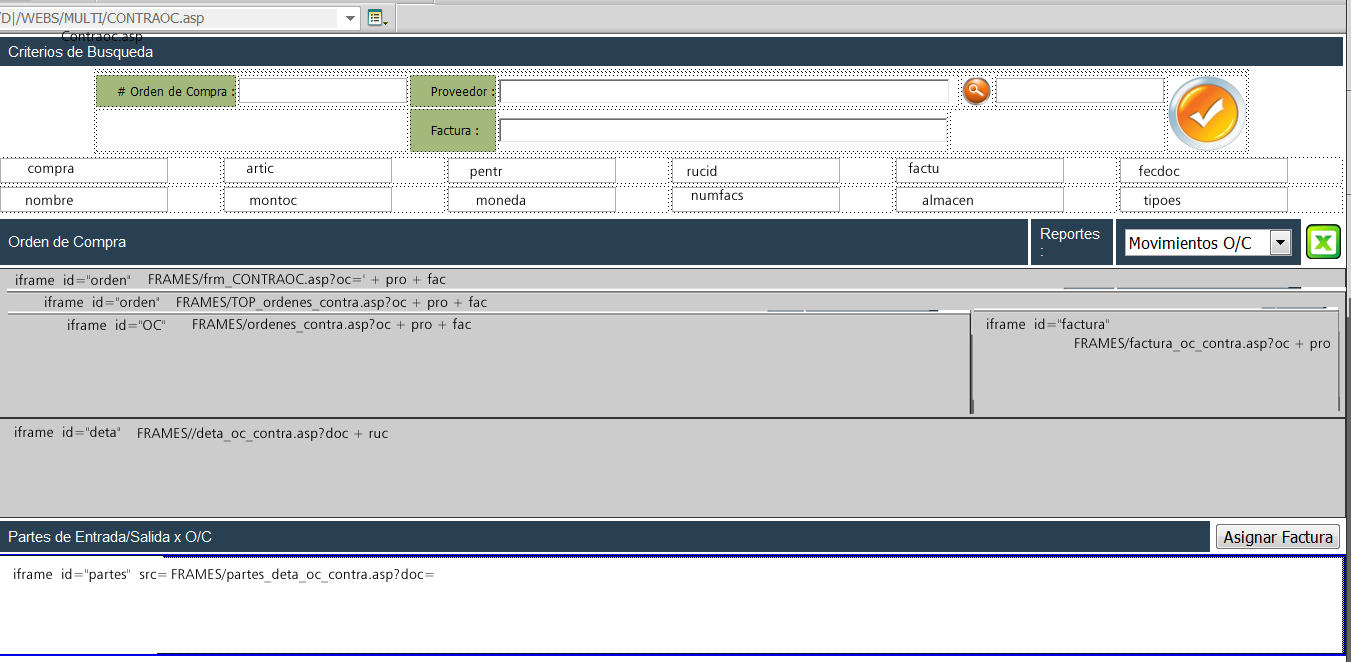
<style>
.page{position:relative;width:1351px;height:662px;background:#ffffff}
.page>*{position:absolute;margin:0}
.t1{font:14px "Humanist777BT-LightB";letter-spacing:0.02em;color:#000000}
</style>
<div class="page">
<p class="t1" style="left:62px;top:31px;width:80px;height:13px">Contraoc.asp</p>
<p class="t1" style="left:28px;top:165px;width:46px;height:11px">compra</p>
<p class="t1" style="left:247px;top:162px;width:27px;height:11px">artic</p>
<p class="t1" style="left:470px;top:167px;width:33px;height:12px">pentr</p>
<p class="t1" style="left:687px;top:165px;width:30px;height:11px">rucid</p>
<p class="t1" style="left:908px;top:162px;width:31px;height:11px">factu</p>
<p class="t1" style="left:1138px;top:165px;width:42px;height:11px">fecdoc</p>
<p class="t1" style="left:26px;top:194px;width:47px;height:11px">nombre</p>
<p class="t1" style="left:250px;top:196px;width:47px;height:9px">montoc</p>
<p class="t1" style="left:477px;top:194px;width:48px;height:11px">moneda</p>
<p class="t1" style="left:692px;top:189px;width:51px;height:11px">numfacs</p>
<p class="t1" style="left:922px;top:194px;width:51px;height:11px">almacen</p>
<p class="t1" style="left:1143px;top:194px;width:38px;height:14px">tipoes</p>
<p class="t1" style="left:16px;top:274px;width:114px;height:11px">iframe  id="orden"</p>
<p class="t1" style="left:149px;top:273px;width:297px;height:15px">FRAMES/frm_CONTRAOC.asp?oc=' + pro + fac</p>
<p class="t1" style="left:45px;top:296px;width:114px;height:11px">iframe  id="orden"</p>
<p class="t1" style="left:177px;top:296px;width:310px;height:15px">FRAMES/TOP_ordenes_contra.asp?oc + pro + fac</p>
<p class="t1" style="left:193px;top:318px;width:278px;height:15px">FRAMES/ordenes_contra.asp?oc + pro + fac</p>
<p class="t1" style="left:987px;top:318px;width:122px;height:11px">iframe  id="factura"</p>
<p class="t1" style="left:68px;top:319px;width:97px;height:11px">iframe  id="OC"</p>
<p class="t1" style="left:1075px;top:337px;width:255px;height:15px">FRAMES/factura_oc_contra.asp?oc + pro</p>
<p class="t1" style="left:15px;top:426px;width:105px;height:11px">iframe  id="deta"</p>
<p class="t1" style="left:138px;top:427px;width:250px;height:15px">FRAMES//deta_oc_contra.asp?doc + ruc</p>
<p class="t1" style="left:14px;top:568px;width:153px;height:14px">iframe  id="partes"  src=</p>
<p class="t1" style="left:172px;top:568px;width:262px;height:15px">FRAMES/partes_deta_oc_contra.asp?doc=</p>
</div>
